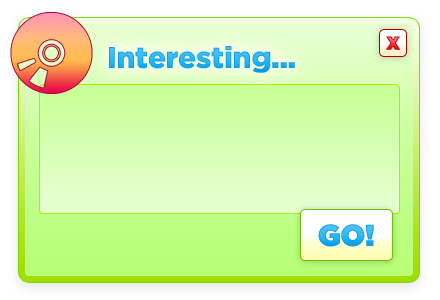
<style>
.page{position:relative;width:440px;height:300px}
.page>*{position:absolute;margin:0}
.t1{font:24px "Gotham-Black"}
.t2{font:30px "Gotham-Black";letter-spacing:-0.01em;color:#21aef1}
.t3{font:30px "Gotham-Ultra"}
</style>
<div class="page">
<p class="t1" style="left:386px;top:36px;width:14px;height:14px">x</p>
<p class="t2" style="left:109px;top:46px;width:186px;height:27px">Interesting...</p>
<p class="t3" style="left:318px;top:224px;width:56px;height:23px">GO!</p>
</div>
